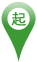
<style>
.page{position:relative;width:37px;height:62px;background:#ffffff}
.page>*{position:absolute;margin:0}
.t1{font:14.8px "SimHei";color:#3c9a35}
</style>
<div class="page">
<p class="t1" style="left:11px;top:12px;width:15px;height:14px">起</p>
</div>
